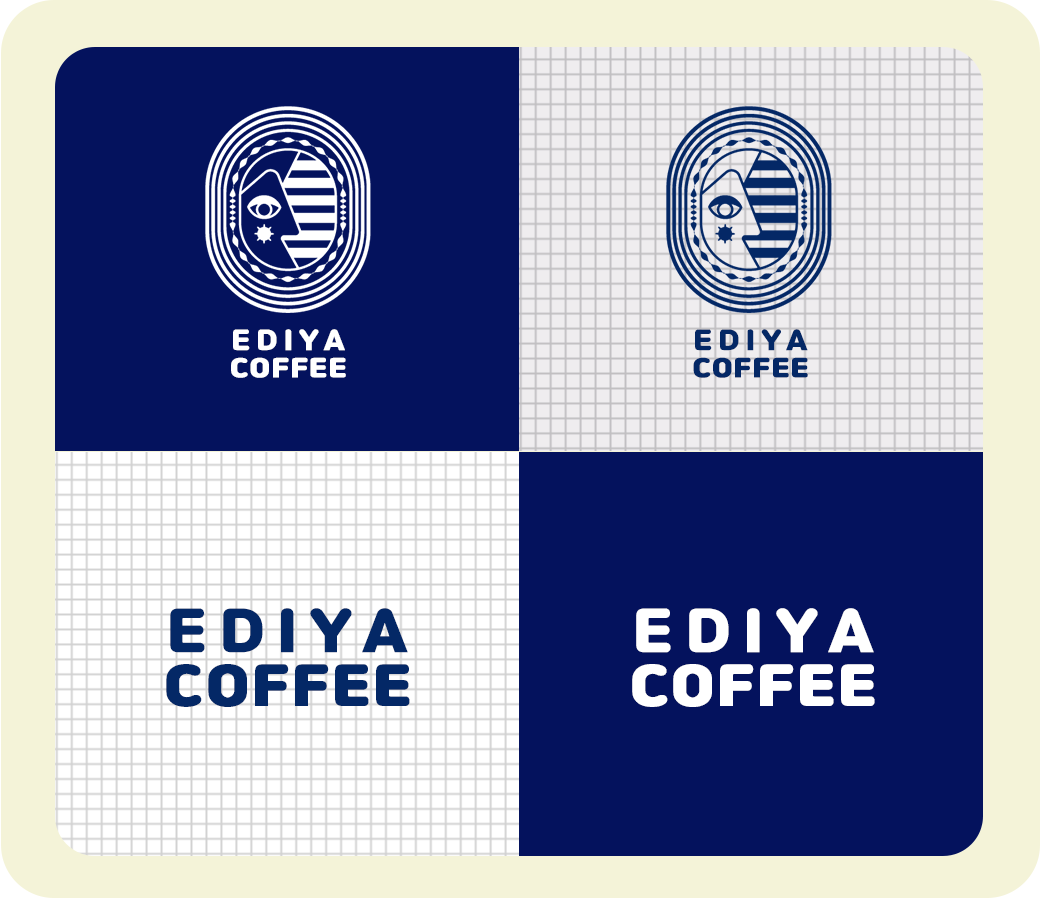
<style>
.page{position:relative;width:1040px;height:899px;background:#04125d}
.page>*{position:absolute;margin:0}
.t1{font:24.1px/27.5px "Jalnan";letter-spacing:0.05em;color:#ffffff;font-weight:bold;scale:1.09 1}
.t2{font:25.8px/27.5px "Jalnan";letter-spacing:0.23em;color:#ffffff;scale:1.09 1}
.t3{font:24.1px/27.5px "Jalnan";letter-spacing:0.05em;color:#042866;font-weight:bold;scale:1.09 1}
.t4{font:25.8px/27.5px "Jalnan";letter-spacing:0.23em;color:#042866;scale:1.09 1}
.t5{font:50.9px/53.4px "Jalnan";letter-spacing:0.05em;color:#042866;font-weight:bold;scale:1.09 1}
.t6{font:54.6px/53.4px "Jalnan";letter-spacing:0.23em;color:#042866;scale:1.09 1}
.t7{font:50.9px/53.4px "Jalnan";letter-spacing:0.05em;color:#ffffff;font-weight:bold;scale:1.09 1}
.t8{font:54.6px/53.4px "Jalnan";letter-spacing:0.23em;color:#ffffff;scale:1.09 1}
</style>
<div class="page">
<p class="t1" style="left:231px;top:329px;width:115px;height:49px;text-align:center"><span class="t2">EDIYA<br></span>COFFEE</p>
<p class="t3" style="left:693px;top:329px;width:115px;height:49px;text-align:center"><span class="t4">EDIYA<br></span>COFFEE</p>
<p class="t5" style="left:166px;top:608px;width:244px;height:99px;text-align:center"><span class="t6">EDIYA<br></span>COFFEE</p>
<p class="t7" style="left:632px;top:608px;width:243px;height:99px;text-align:center"><span class="t8">EDIYA<br></span>COFFEE</p>
</div>
